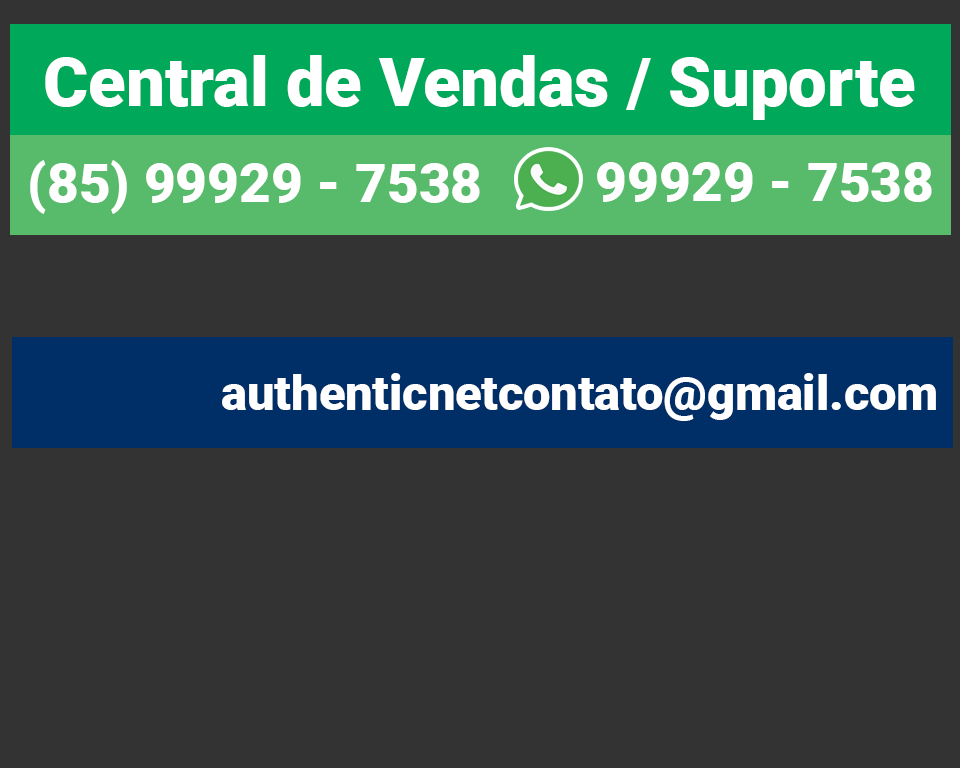
<style>
.page{position:relative;width:960px;height:768px;background:#333333}
.page>*{position:absolute;margin:0}
.t1{font:68px "Roboto-Black";color:#ffffff}
.t2{font:54.4px "Roboto-Black";color:#ffffff}
.t3{font:48px "Roboto-Black";color:#ffffff}
</style>
<div class="page">
<p class="t1" style="left:45px;top:55px;width:870px;height:65px">Central de Vendas / Suporte</p>
<p class="t2" style="left:30px;top:160px;width:450px;height:54px">(85) 99929 - 7538</p>
<p class="t2" style="left:597px;top:162px;width:335px;height:40px">99929 - 7538</p>
<p class="t3" style="left:222px;top:373px;width:714px;height:48px">authenticnetcontato@gmail.com</p>
</div>
